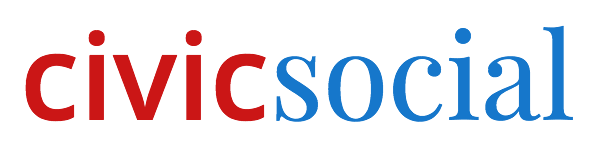
<style>
.page{position:relative;width:598px;height:147px;background:#ffffff}
.page>*{position:absolute;margin:0}
.t1{font:119.5px "PlayfairDisplay-Regular";color:#1677cb}
.t2{font:119.5px "OpenSans-Semibold";color:#cb1616}
</style>
<div class="page">
<p class="t1" style="left:25px;top:25px;width:548px;height:97px"><span class="t2">civic</span>social</p>
</div>
